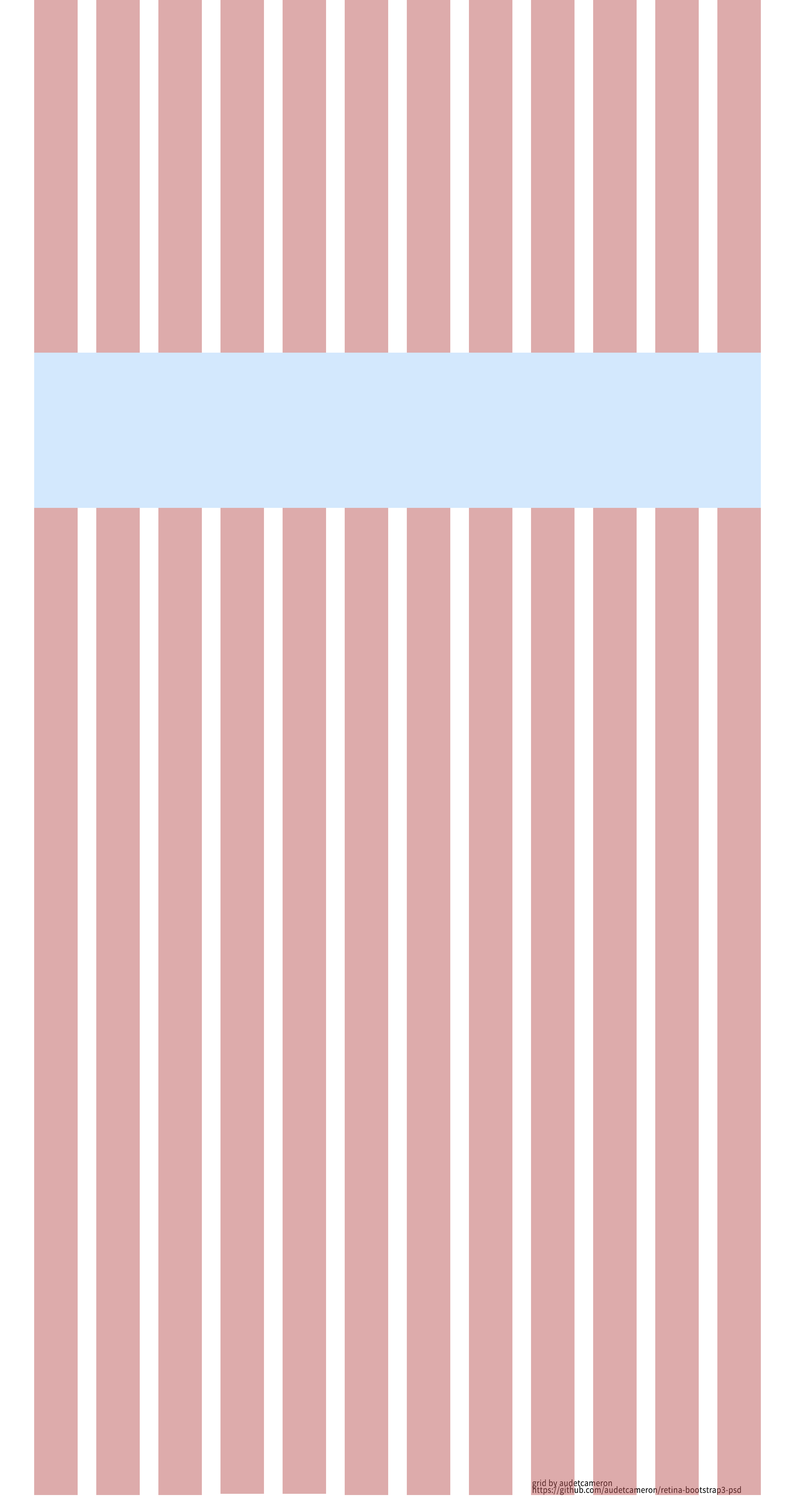
<style>
.page{position:relative;width:795px;height:1500px;background:#ddabab}
.page>*{position:absolute;margin:0}
.t1{font:9.3px/6.8px "SourceSansPro-Regular";letter-spacing:0.02em;color:#582626;scale:0.9 1}
</style>
<div class="page">
<p class="t1" style="left:532px;top:1479px;width:209px;height:16px">grid by audetcameron<br>https://github.com/audetcameron/retina-bootstrap3-psd</p>
</div>
